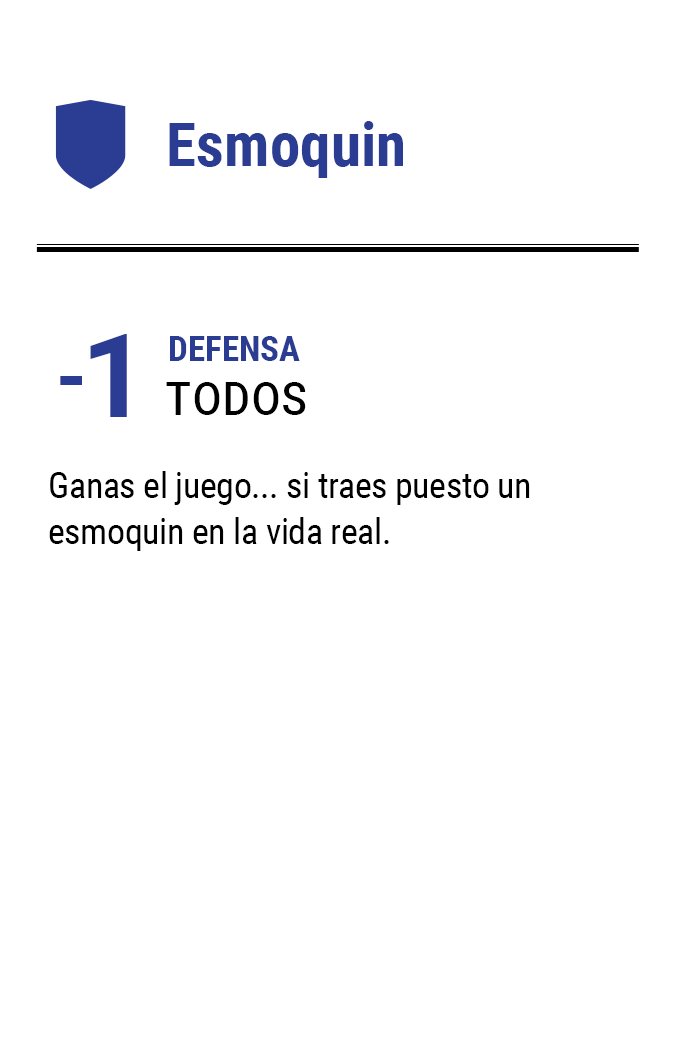
<style>
.page{position:relative;width:675px;height:1050px;background:#ffffff}
.page>*{position:absolute;margin:0}
.t1{font:61.2px "RobotoCondensed-Bold";color:#2a3d93}
.t2{font:79.2px "Roboto-Bold";letter-spacing:-0.16em;color:#2a3d93}
.t3{font:116.7px "Roboto-Bold";letter-spacing:-0.16em;color:#2a3d93}
.t4{font:35px "RobotoCondensed-Bold";color:#2a3d93}
.t5{font:58.3px "RobotoCondensed-Regular";color:#000000;font-variant:small-caps}
.t6{font:35.8px/45.8px "RobotoCondensed-Regular";letter-spacing:-0.01em;color:#000000}
</style>
<div class="page">
<p class="t1" style="left:169px;top:121px;width:234px;height:57px">Esmoquin</p>
<p class="t2" style="left:60px;top:334px;width:67px;height:83px">- <span class="t3">1</span></p>
<p class="t4" style="left:170px;top:336px;width:130px;height:25px">DEFENSA</p>
<p class="t5" style="left:166px;top:382px;width:140px;height:33px">todos</p>
<p class="t6" style="left:49px;top:471px;width:481px;height:80px">Ganas el juego... si traes puesto un esmoquin en la vida real.</p>
</div>
